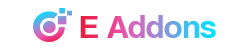
<style>
.page{position:relative;width:250px;height:50px;background:#ffffff}
.page>*{position:absolute;margin:0}
.t1{font:33px "CoolveticaRg-Regular";letter-spacing:0.01em;scale:1.03 1}
</style>
<div class="page">
<p class="t1" style="left:80px;top:15px;width:136px;height:23px">E Addons</p>
</div>
